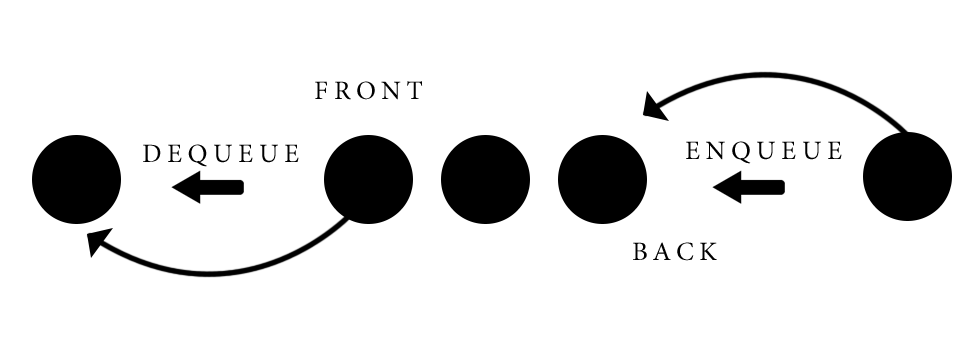
<style>
.page{position:relative;width:980px;height:340px;background:#ffffff}
.page>*{position:absolute;margin:0}
.t1{font:26.7px "MinionPro-Regular";letter-spacing:0.2em;color:#000000;text-transform:uppercase}
</style>
<div class="page">
<p class="t1" style="left:315px;top:81px;width:108px;height:19px">Front</p>
<p class="t1" style="left:143px;top:144px;width:156px;height:23px">Dequeue</p>
<p class="t1" style="left:686px;top:141px;width:156px;height:23px">enqueue</p>
<p class="t1" style="left:633px;top:242px;width:84px;height:19px">back</p>
</div>
